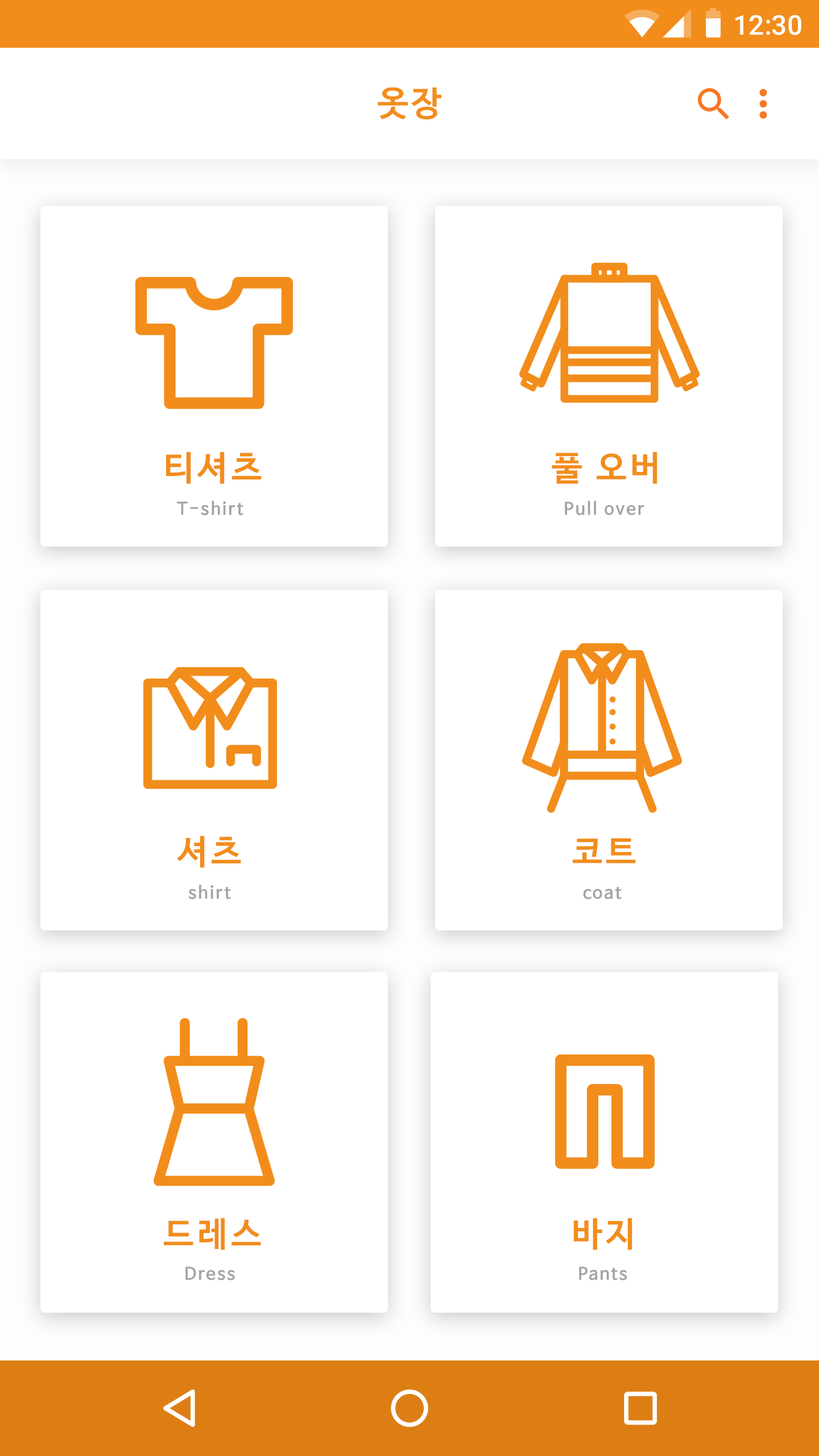
<style>
.page{position:relative;width:819px;height:1456px;background:#ffffff}
.page>*{position:absolute;margin:0}
.t1{font:27.3px "Roboto-Medium";color:#ffffff}
.t2{font:34.1px "NanumBarunGothicBold";letter-spacing:0.1em;color:#f28d1c}
.t3{font:17.1px "NanumBarunGothicBold";letter-spacing:0.1em;color:#a3a3a3}
</style>
<div class="page">
<p class="t1" style="left:735px;top:15px;width:66px;height:20px">12:30</p>
<p class="t2" style="left:378px;top:87px;width:63px;height:32px">옷장</p>
<p class="t2" style="left:166px;top:452px;width:96px;height:32px">티셔츠</p>
<p class="t2" style="left:552px;top:452px;width:105px;height:32px">풀 오버</p>
<p class="t3" style="left:177px;top:500px;width:66px;height:15px">T-shirt</p>
<p class="t3" style="left:565px;top:500px;width:79px;height:15px">Pull over</p>
<p class="t2" style="left:177px;top:835px;width:64px;height:33px">셔츠</p>
<p class="t2" style="left:573px;top:838px;width:63px;height:25px">코트</p>
<p class="t3" style="left:189px;top:884px;width:42px;height:15px">shirt</p>
<p class="t3" style="left:583px;top:887px;width:39px;height:12px">coat</p>
<p class="t2" style="left:164px;top:1218px;width:97px;height:32px">드레스</p>
<p class="t2" style="left:573px;top:1218px;width:59px;height:32px">바지</p>
<p class="t3" style="left:185px;top:1267px;width:50px;height:13px">Dress</p>
<p class="t3" style="left:579px;top:1267px;width:48px;height:13px">Pants</p>
</div>
